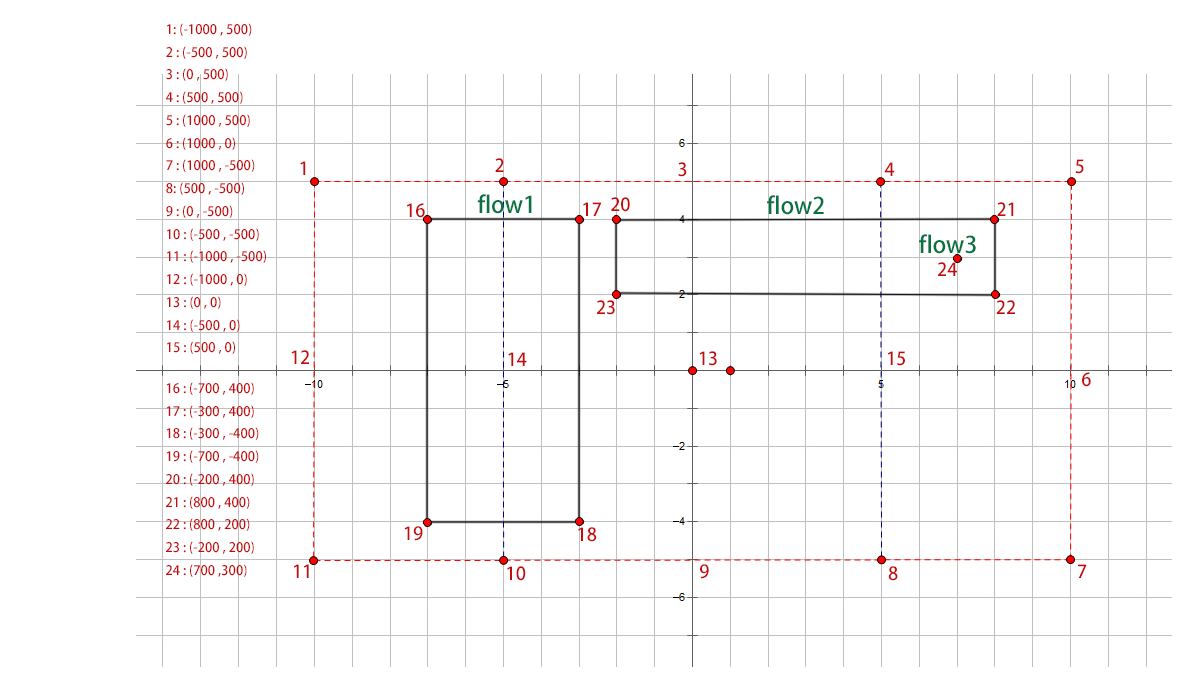
<style>
.page{position:relative;width:1200px;height:700px;background:#ffffff}
.page>*{position:absolute;margin:0}
.t1{font:13px "AdobeHeitiStd-Regular";color:#c40a0a}
.t2{font:18px "AdobeHeitiStd-Regular";color:#c40a0a}
.t3{font:23px "AdobeHeitiStd-Regular";color:#077342}
</style>
<div class="page">
<p class="t1" style="left:166px;top:23px;width:100px;height:331px">1: (-1000 , 500)<br>2 : (-500 , 500)<br>3 : (0 , 500)<br>4 : (500 , 500)<br>5 : (1000 , 500)<br>6 : (1000 , 0)<br>7 : (1000 , -500)<br>8: (500 , -500)<br>9 : (0 , -500)<br>10 : (-500 , -500)<br>11 : (-1000 , -500)<br>12 : (-1000 , 0)<br>13 : (0 , 0)<br>14 : (-500 , 0)<br>15 : (500 , 0)</p>
<p class="t2" style="left:300px;top:161px;width:6px;height:14px">1</p>
<p class="t2" style="left:495px;top:158px;width:9px;height:14px">2</p>
<p class="t2" style="left:1075px;top:159px;width:9px;height:15px">5</p>
<p class="t2" style="left:678px;top:162px;width:9px;height:15px">3</p>
<p class="t2" style="left:884px;top:162px;width:11px;height:14px">4</p>
<p class="t3" style="left:477px;top:194px;width:55px;height:20px">flow1</p>
<p class="t2" style="left:611px;top:197px;width:19px;height:15px">20</p>
<p class="t3" style="left:767px;top:195px;width:57px;height:20px">flow2</p>
<p class="t2" style="left:407px;top:203px;width:18px;height:15px">16</p>
<p class="t2" style="left:583px;top:202px;width:18px;height:14px">17</p>
<p class="t2" style="left:997px;top:202px;width:17px;height:14px">21</p>
<p class="t3" style="left:919px;top:234px;width:57px;height:20px">flow3</p>
<p class="t2" style="left:938px;top:262px;width:19px;height:14px">24</p>
<p class="t2" style="left:597px;top:300px;width:18px;height:15px">23</p>
<p class="t2" style="left:996px;top:300px;width:19px;height:14px">22</p>
<p class="t2" style="left:291px;top:350px;width:18px;height:14px">12</p>
<p class="t2" style="left:508px;top:352px;width:19px;height:14px">14</p>
<p class="t2" style="left:699px;top:351px;width:18px;height:15px">13</p>
<p class="t2" style="left:888px;top:351px;width:17px;height:15px">15</p>
<p class="t2" style="left:1082px;top:372px;width:9px;height:15px">6</p>
<p class="t1" style="left:166px;top:382px;width:93px;height:195px">16 : (-700 , 400)<br>17 : (-300 , 400)<br>18 : (-300 , -400)<br>19 : (-700 , -400)<br>20 : (-200 , 400)<br>21 : (800 , 400)<br>22 : (800 , 200)<br>23 : (-200 , 200)<br>24 : (700 ,300)</p>
<p class="t2" style="left:404px;top:526px;width:19px;height:15px">19</p>
<p class="t2" style="left:578px;top:527px;width:19px;height:15px">18</p>
<p class="t2" style="left:294px;top:564px;width:15px;height:14px">11</p>
<p class="t2" style="left:507px;top:566px;width:19px;height:15px">10</p>
<p class="t2" style="left:700px;top:564px;width:9px;height:15px">9</p>
<p class="t2" style="left:888px;top:566px;width:10px;height:15px">8</p>
<p class="t2" style="left:1078px;top:564px;width:9px;height:14px">7</p>
</div>
